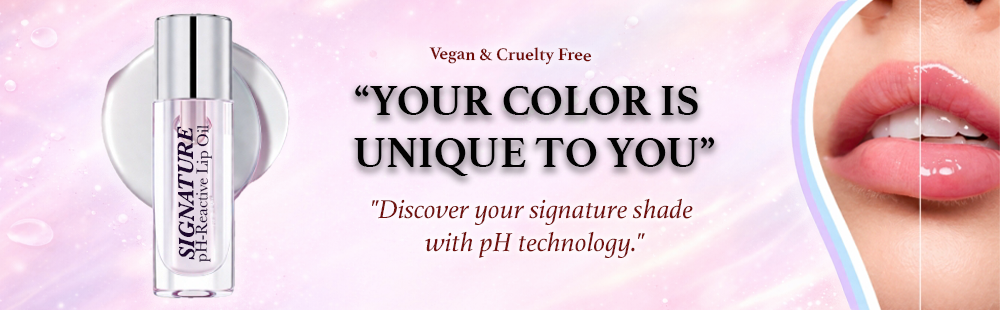
<style>
.page{position:relative;width:1000px;height:310px}
.page>*{position:absolute;margin:0}
.t1{font:17.7px "Athelas-Bold";color:#700a06}
.t2{font:43.9px "Athelas-Bold";color:#020202}
.t3{font:22.9px "Baskerville-BoldItalic";color:#1c072c}
.t4{font:16.6px "Baskerville";color:#1c072c}
.t5{font:27.4px "Athelas-Italic";color:#71120f}
</style>
<div class="page">
<p class="t1" style="left:429px;top:47px;width:163px;height:18px">Vegan &amp; Cruelty Free</p>
<p class="t2" style="left:354px;top:85px;width:361px;height:91px">“YOUR COLOR IS <br>UNIQUE TO YOU”</p>
<p class="t3" style="left:177px;top:126px;width:18px;height:134px;rotate:-91deg">SIGNATURE</p>
<p class="t4" style="left:195px;top:125px;width:17px;height:137px;rotate:-89deg">pH-Reactive Lip Oil</p>
<p class="t5" style="left:372px;top:198px;width:321px;height:60px;text-align:center">"Discover your signature shade <br>with pH technology."</p>
</div>
